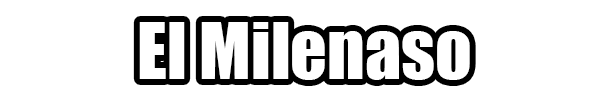
<style>
.page{position:relative;width:600px;height:100px;background:#ffffff}
.page>*{position:absolute;margin:0}
.t1{font:72px "Impact";color:#ffffff}
</style>
<div class="page">
<p class="t1" style="left:139px;top:22px;width:331px;height:58px">El Milenaso</p>
</div>
